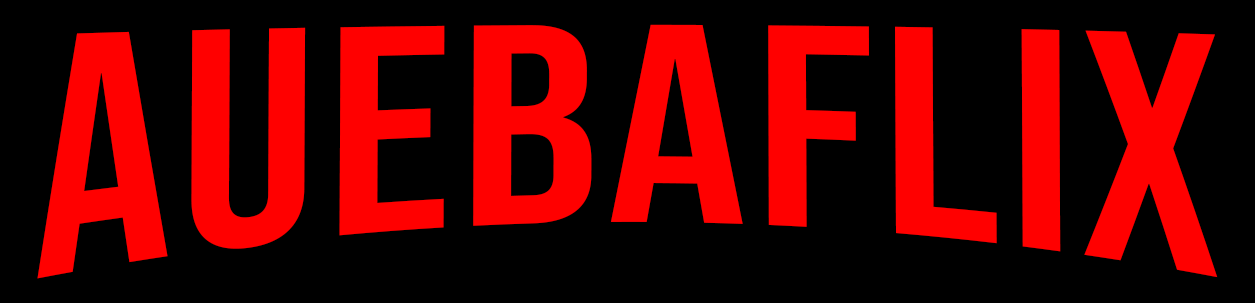
<style>
.page{position:relative;width:1255px;height:303px;background:#000000}
.page>*{position:absolute;margin:0}
.t1{font:348.6px "BebasNeue-Regular";letter-spacing:0.02em;color:#ff0000}
</style>
<div class="page">
<p class="t1" style="left:37px;top:24px;width:1181px;height:255px">AUEBAFLIX</p>
</div>
